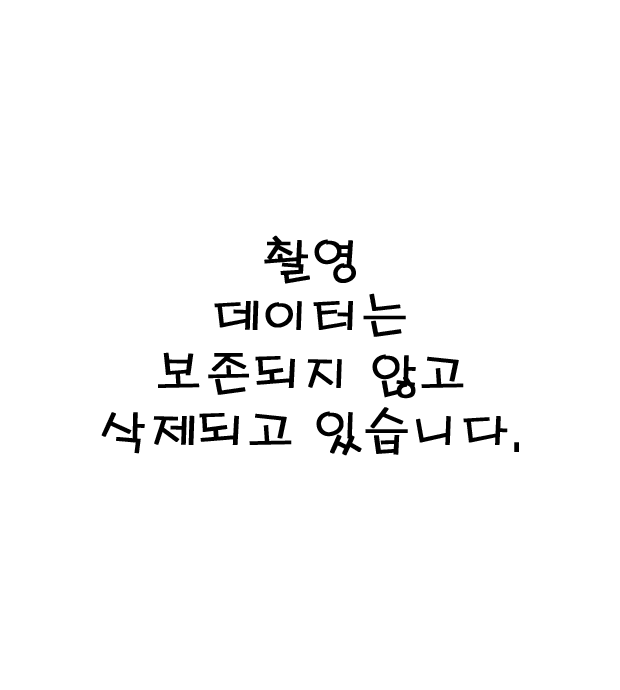
<style>
.page{position:relative;width:620px;height:690px;background:#ffffff}
.page>*{position:absolute;margin:0}
.t1{font:48px "H2porL";color:#000000;font-weight:bold}
</style>
<div class="page">
<p class="t1" style="left:101px;top:235px;width:418px;height:221px;text-align:center">촬영<br>데이터는<br>보존되지 않고<br>삭제되고 있습니다.</p>
</div>
